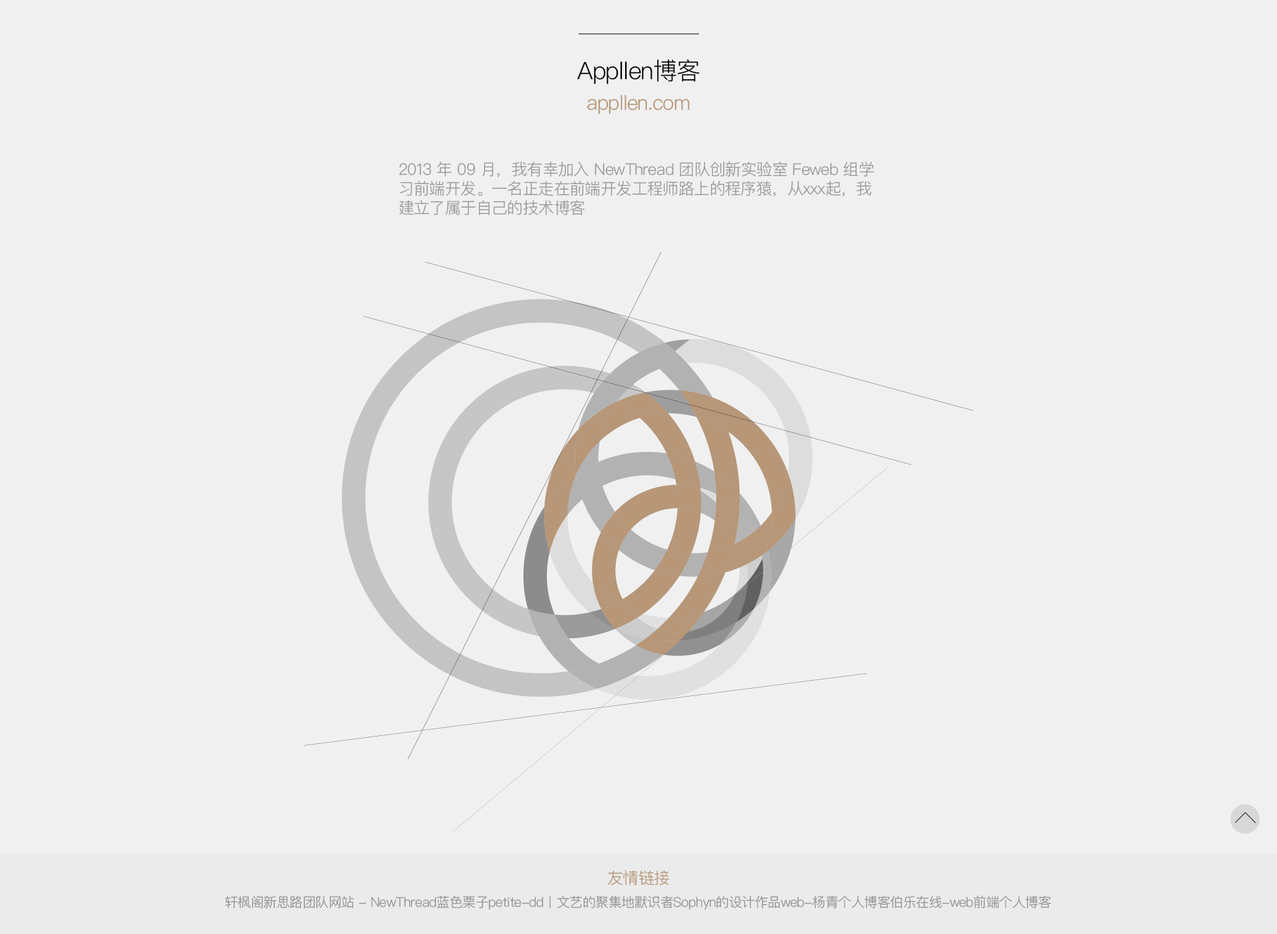
<style>
.page{position:relative;width:1277px;height:934px;background:#f0f0f0}
.page>*{position:absolute;margin:0}
.t1{font:23.9px "PingFangSC-Light";letter-spacing:-0.025em;color:#000000}
.t2{font:19.9px "PingFangSC-Light";letter-spacing:-0.025em;color:#b79778}
.t3{font:16px "PingFangSC-Light";letter-spacing:-0.025em;color:#999999}
.t4{font:16px "PingFangSC-Light";letter-spacing:-0.025em;color:#b79778}
.t5{font:13.3px "PingFangSC-Light";letter-spacing:-0.025em;color:#959595}
</style>
<div class="page">
<p class="t1" style="left:577px;top:59px;width:122px;height:25px">Appllen博客</p>
<p class="t2" style="left:587px;top:95px;width:102px;height:19px">appllen.com</p>
<p class="t3" style="left:399px;top:162px;width:475px;height:53px">2013 年 09 月，我有幸加入 NewThread 团队创新实验室 Feweb 组学习前端开发。一名正走在前端开发工程师路上的程序猿，从xxx起，我建立了属于自己的技术博客</p>
<p class="t4" style="left:608px;top:870px;width:61px;height:16px">友情链接</p>
<p class="t5" style="left:225px;top:896px;width:826px;height:14px">轩枫阁新思路团队网站 - NewThread蓝色栗子petite-dd丨文艺的聚集地默识者Sophyn的设计作品web-杨青个人博客伯乐在线-web前端个人博客</p>
</div>
